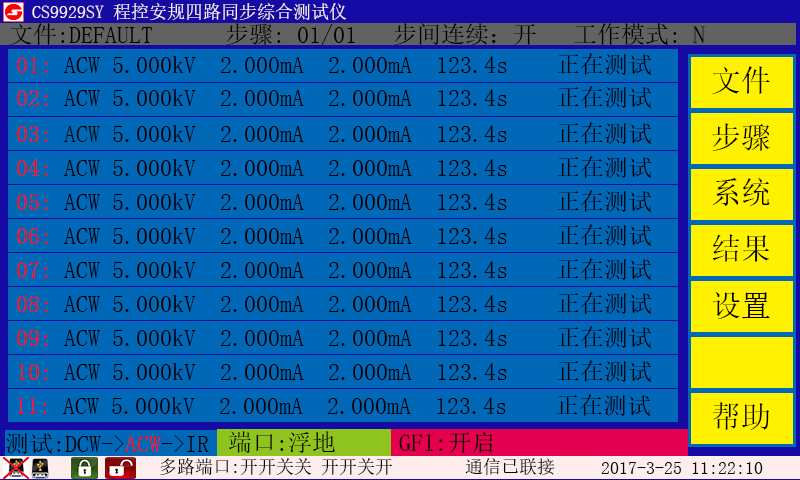
<style>
.page{position:relative;width:800px;height:480px;background:#0068b7}
.page>*{position:absolute;margin:0}
.t1{font:18px "SimSun";color:#f9ecec}
.t2{font:24px "SimSun";color:#000000}
.t3{font:24px "SimSun";color:#f1072d}
.t4{font:30px "SimSun";color:#000000}
.t5{font:24px "SimSun";color:#f30c2d}
.t6{font:24px "SimSun";color:#fd0707}
.t7{font:24px "SimSun";color:#0b0808}
.t8{font:24px "SimSun";color:#f60729}
.t9{font:24px "SimSun";color:#f30a0f}
.t10{font:23.7px "SimSun";color:#000000}
.t11{font:18px "SimSun";color:#080808}
</style>
<div class="page">
<p class="t1" style="left:32px;top:3px;width:315px;height:17px">CS9929SY 程控安规四路同步综合测试仪</p>
<p class="t2" style="left:10px;top:23px;width:695px;height:22px">文件:DEFAULT  步骤: 01/01   步间连续：开   工作模式: N</p>
<p class="t2" style="left:17px;top:53px;width:634px;height:22px"><span class="t3"> 01:</span> ACW 5.000kV  2.000mA  2.000mA  123.4s    正在测试工</p>
<p class="t4" style="left:712px;top:66px;width:58px;height:28px">文件</p>
<p class="t2" style="left:17px;top:86px;width:634px;height:22px"><span class="t5"> 02:</span> ACW 5.000kV  2.000mA  2.000mA  123.4s    正在测试工</p>
<p class="t2" style="left:17px;top:122px;width:634px;height:22px"><span class="t6">03: </span><span class="t7">ACW </span>5.000kV  2.000mA  2.000mA  123.4s    正在测试工</p>
<p class="t4" style="left:712px;top:123px;width:58px;height:28px">步骤</p>
<p class="t2" style="left:17px;top:156px;width:634px;height:22px"><span class="t6">04:</span> ACW 5.000kV  2.000mA  2.000mA  123.4s    正在测试工</p>
<p class="t4" style="left:712px;top:178px;width:58px;height:28px">系统</p>
<p class="t2" style="left:17px;top:190px;width:634px;height:22px"><span class="t6">05:</span> ACW 5.000kV  2.000mA  2.000mA  123.4s    正在测试工</p>
<p class="t2" style="left:17px;top:224px;width:634px;height:22px"><span class="t6">06:</span> ACW 5.000kV  2.000mA  2.000mA  123.4s    正在测试工</p>
<p class="t4" style="left:712px;top:234px;width:58px;height:28px">结果</p>
<p class="t2" style="left:17px;top:258px;width:634px;height:22px"><span class="t6">07:</span> ACW 5.000kV  2.000mA  2.000mA  123.4s    正在测试工</p>
<p class="t2" style="left:17px;top:292px;width:634px;height:22px"><span class="t6"> 08:</span> ACW 5.000kV  2.000mA  2.000mA  123.4s    正在测试工</p>
<p class="t4" style="left:712px;top:292px;width:58px;height:27px">设置</p>
<p class="t2" style="left:17px;top:326px;width:634px;height:22px"><span class="t6">09:</span> ACW 5.000kV  2.000mA  2.000mA  123.4s    正在测试工</p>
<p class="t2" style="left:18px;top:360px;width:633px;height:22px"><span class="t6">10:</span> ACW 5.000kV  2.000mA  2.000mA  123.4s    正在测试工</p>
<p class="t2" style="left:17px;top:394px;width:633px;height:22px"><span class="t8">11:</span> ACW 5.000kV  2.000mA  2.000mA  123.4s    正在测试工</p>
<p class="t4" style="left:712px;top:402px;width:57px;height:28px">帮助</p>
<p class="t2" style="left:6px;top:433px;width:203px;height:21px">测试:DCW-&gt;<span class="t9">ACW</span>-&gt;IR</p>
<p class="t2" style="left:229px;top:431px;width:106px;height:22px">端口:浮地</p>
<p class="t10" style="left:399px;top:431px;width:94px;height:23px">GFI:开启</p>
<p class="t11" style="left:160px;top:458px;width:233px;height:17px">多路端口:开开关关 开开关开</p>
<p class="t11" style="left:465px;top:458px;width:90px;height:17px">通信已联接</p>
<p class="t11" style="left:601px;top:462px;width:162px;height:12px">2017-3-25 11:22:10</p>
</div>
